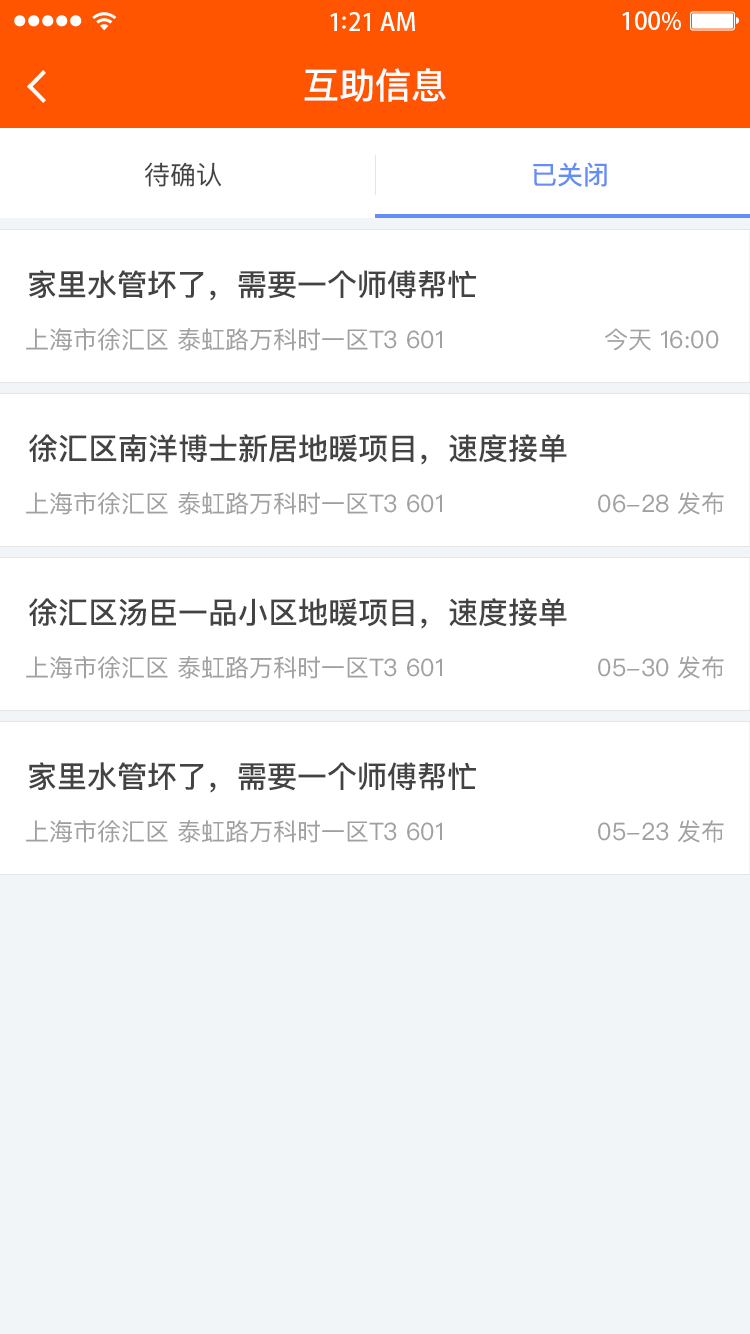
<style>
.page{position:relative;width:750px;height:1334px;background:#ffffff}
.page>*{position:absolute;margin:0}
.t1{font:36px "PingFangSC-Medium";color:#ffffff}
.t2{font:26px "PingFangSC-Regular";color:#434343}
.t3{font:26px "PingFangSC-Medium";color:#648df6}
.t4{font:30px "PingFangSC-Medium";color:#434343}
.t5{font:24px "PingFangSC-Regular";color:#a0a0a0}
</style>
<div class="page">
<p class="t1" style="left:304px;top:68px;width:142px;height:34px">互助信息</p>
<p class="t2" style="left:145px;top:162px;width:77px;height:25px">待确认</p>
<p class="t3" style="left:533px;top:162px;width:74px;height:25px">已关闭</p>
<p class="t4" style="left:29px;top:270px;width:447px;height:31px">家里水管坏了，需要一个师傅帮忙</p>
<p class="t5" style="left:26px;top:328px;width:416px;height:23px">上海市徐汇区 泰虹路万科时一区T3 601</p>
<p class="t5" style="left:605px;top:328px;width:114px;height:23px">今天 16:00</p>
<p class="t4" style="left:29px;top:434px;width:538px;height:31px">徐汇区南洋博士新居地暖项目，速度接单</p>
<p class="t5" style="left:26px;top:492px;width:416px;height:23px">上海市徐汇区 泰虹路万科时一区T3 601</p>
<p class="t5" style="left:598px;top:492px;width:126px;height:23px">06-28 发布</p>
<p class="t4" style="left:29px;top:598px;width:538px;height:31px">徐汇区汤臣一品小区地暖项目，速度接单</p>
<p class="t5" style="left:26px;top:656px;width:416px;height:23px">上海市徐汇区 泰虹路万科时一区T3 601</p>
<p class="t5" style="left:598px;top:656px;width:126px;height:23px">05-30 发布</p>
<p class="t4" style="left:29px;top:762px;width:447px;height:31px">家里水管坏了，需要一个师傅帮忙</p>
<p class="t5" style="left:26px;top:820px;width:416px;height:23px">上海市徐汇区 泰虹路万科时一区T3 601</p>
<p class="t5" style="left:598px;top:820px;width:126px;height:23px">05-23 发布</p>
</div>
